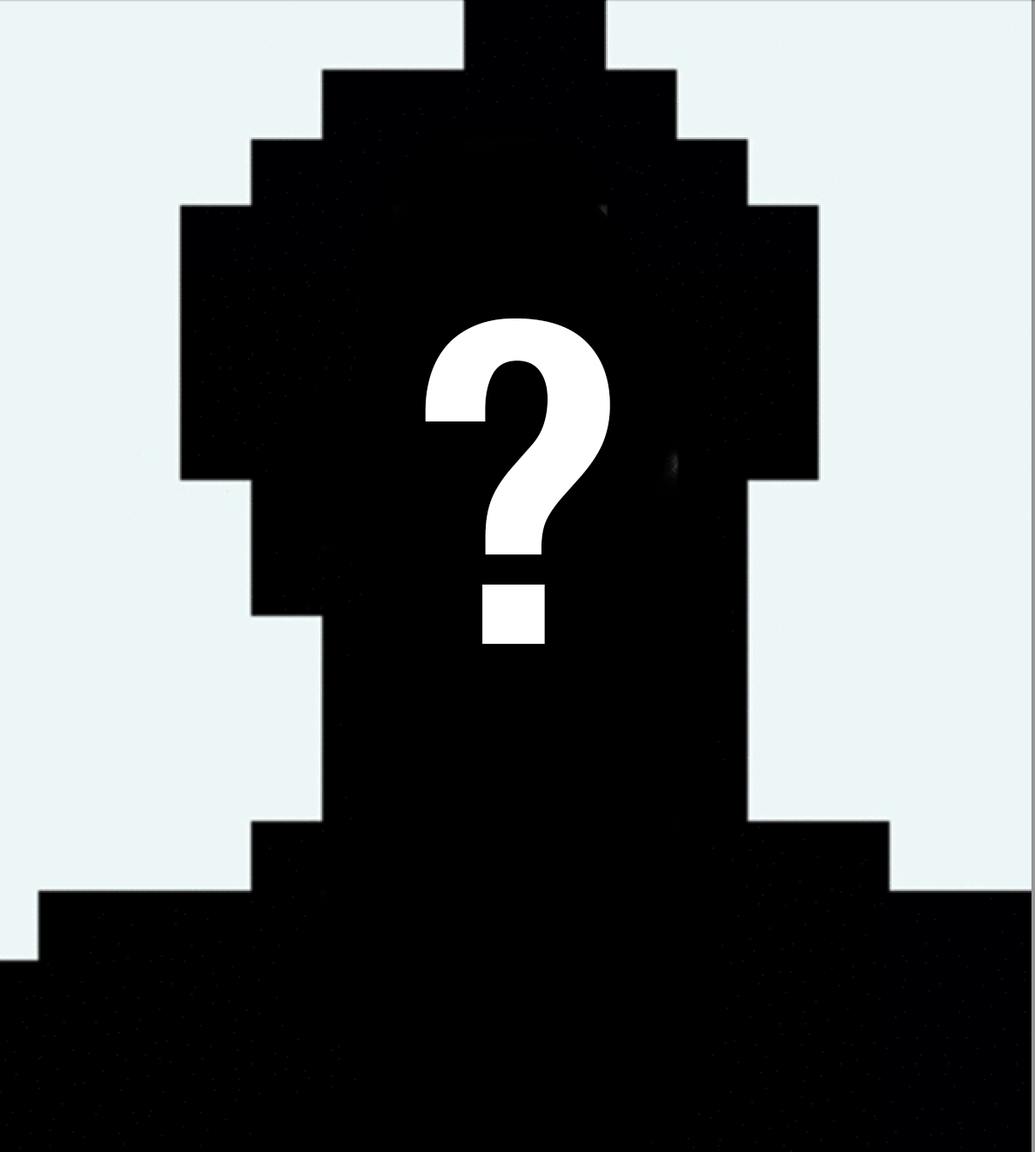
<style>
.page{position:relative;width:1035px;height:1152px;background:#ecf6f6}
.page>*{position:absolute;margin:0}
.t1{font:450.4px "HelveticaNeue-CondensedBold";color:#ffffff}
</style>
<div class="page">
<p class="t1" style="left:425px;top:318px;width:185px;height:326px">?</p>
</div>
